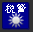
<style>
.page{position:relative;width:33px;height:32px;background:#000090}
.page>*{position:absolute;margin:0}
.t1{font:10.4px "SimSun";color:#ffffff}
</style>
<div class="page">
<p class="t1" style="left:5px;top:4px;width:21px;height:9px">税警</p>
</div>
